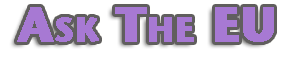
<style>
.page{position:relative;width:300px;height:80px;background:#ffffff}
.page>*{position:absolute;margin:0}
.t1{font:48px "StoneSansITC-Bold";letter-spacing:0.005em;color:#a06ecf;font-variant:small-caps;font-weight:bold}
</style>
<div class="page">
<p class="t1" style="left:17px;top:7px;width:257px;height:35px;opacity:0.92">Ask The EU</p>
</div>
